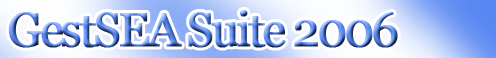
<style>
.page{position:relative;width:496px;height:58px}
.page>*{position:absolute;margin:0}
.t1{font:48px "Georgia";letter-spacing:-0.075em;font-weight:bold}
</style>
<div class="page">
<p class="t1" style="left:8px;top:10px;width:390px;height:38px">GestSEA Suite 2006</p>
</div>
